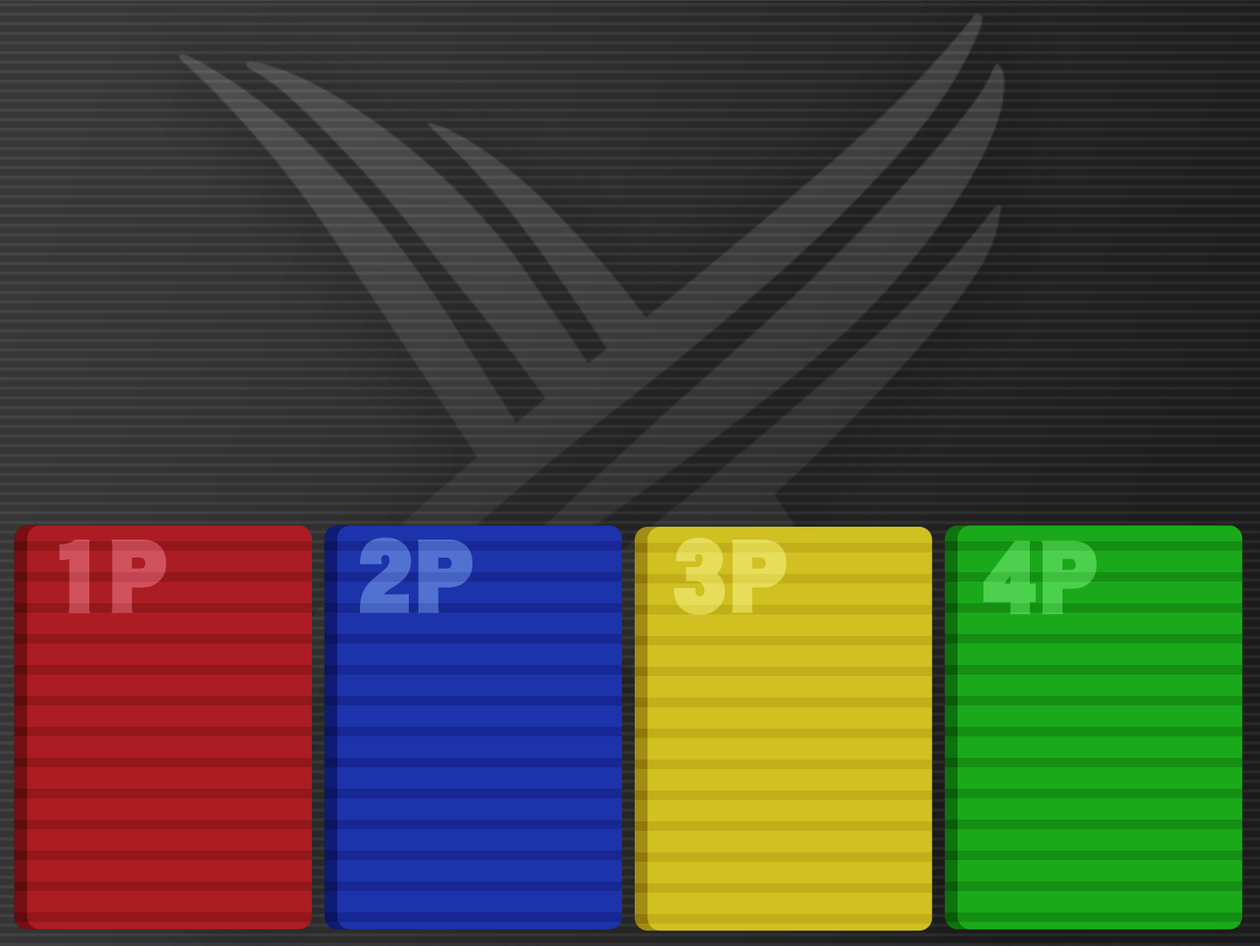
<style>
.page{position:relative;width:1260px;height:946px}
.page>*{position:absolute;margin:0}
.t1{font:93px "DFGothic-SU-WING-RKSJ-H";color:#d1525d}
.t2{font:93px "DFGothic-SU-WING-RKSJ-H";color:#5272d1}
.t3{font:93px "DFGothic-SU-WING-RKSJ-H";color:#e6dd5a}
.t4{font:93px "DFGothic-SU-WING-RKSJ-H";color:#4dd04d}
</style>
<div class="page">
<p class="t1" style="left:59px;top:540px;width:108px;height:73px">1P</p>
<p class="t2" style="left:360px;top:537px;width:113px;height:76px">2P</p>
<p class="t3" style="left:674px;top:537px;width:113px;height:78px">3P</p>
<p class="t4" style="left:984px;top:540px;width:113px;height:74px">4P</p>
</div>
